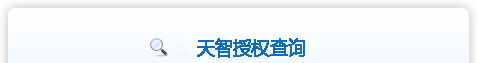
<style>
.page{position:relative;width:478px;height:63px}
.page>*{position:absolute;margin:0}
.t1{font:18px "MicrosoftYaHei";letter-spacing:-0.04em;color:#0e6dc1;font-weight:bold}
</style>
<div class="page">
<p class="t1" style="left:197px;top:38px;width:108px;height:20px">天智授权查询</p>
</div>
